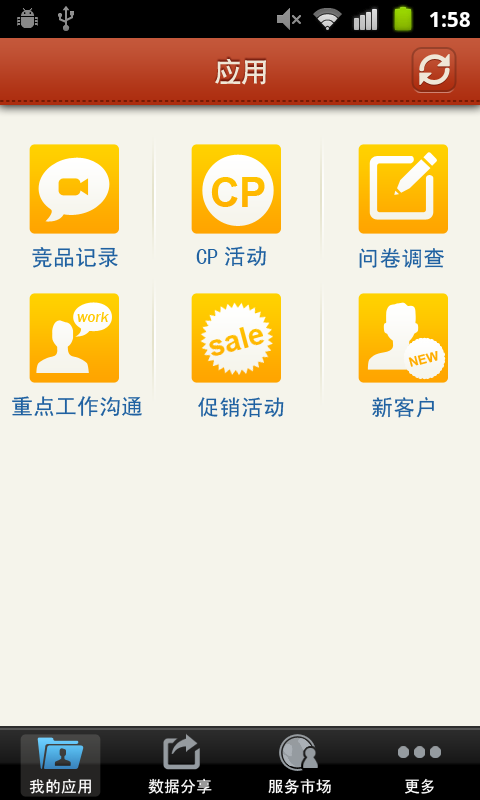
<style>
.page{position:relative;width:480px;height:800px;background:#f5f4eb}
.page>*{position:absolute;margin:0}
.t1{font:27px "CTCuHeiSJ";color:#efe6d6}
.t2{font:22px "SimHei";color:#1f61a1}
.t3{font:15px "FranklinGothic-MediumItalic";color:#ffc900}
.t4{font:13px "Arial-BoldMT";color:#ffad00}
.t5{font:16px "SimHei";color:#ffffff}
</style>
<div class="page">
<p class="t1" style="left:215px;top:58px;width:51px;height:27px">应用</p>
<p class="t2" style="left:196px;top:246px;width:70px;height:21px">CP活动</p>
<p class="t2" style="left:32px;top:247px;width:86px;height:21px">竞品记录</p>
<p class="t2" style="left:359px;top:248px;width:85px;height:20px">问卷调查</p>
<p class="t3" style="left:77px;top:312px;width:32px;height:10px">work</p>
<p class="t4" style="left:408px;top:351px;width:30px;height:16px;rotate:-15deg">NEW</p>
<p class="t2" style="left:12px;top:396px;width:130px;height:21px">重点工作沟通</p>
<p class="t2" style="left:198px;top:397px;width:86px;height:21px">促销活动</p>
<p class="t2" style="left:372px;top:397px;width:62px;height:21px">新客户</p>
<p class="t5" style="left:29px;top:779px;width:62px;height:15px">我的应用</p>
<p class="t5" style="left:148px;top:778px;width:64px;height:16px">数据分享</p>
<p class="t5" style="left:268px;top:778px;width:63px;height:16px">服务市场</p>
<p class="t5" style="left:405px;top:778px;width:29px;height:16px">更多</p>
</div>
